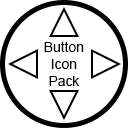
<style>
.page{position:relative;width:128px;height:128px;background:#ffffff}
.page>*{position:absolute;margin:0}
.t1{font:13.9px "ArialMT";color:#000000}
</style>
<div class="page">
<p class="t1" style="left:44px;top:41px;width:40px;height:45px;text-align:center">Button<br>Icon<br>Pack</p>
</div>
